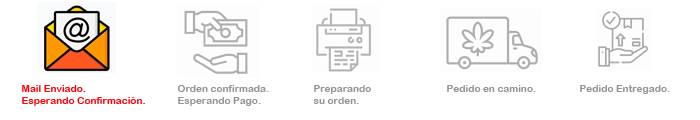
<style>
.page{position:relative;width:700px;height:120px;background:#ffffff}
.page>*{position:absolute;margin:0}
.t1{font:10px "ArialRoundedMTBold";color:#fe060c}
.t2{font:10px "ArialRoundedMTBold";color:#939394}
</style>
<div class="page">
<p class="t1" style="left:22px;top:85px;width:123px;height:21px">Mail Enviado.<br>Esperando Confirmación.</p>
<p class="t2" style="left:177px;top:85px;width:92px;height:21px">Orden confirmada.<br>Esperando Pago.</p>
<p class="t2" style="left:313px;top:85px;width:58px;height:19px">Preparando <br>su orden.</p>
<p class="t2" style="left:447px;top:85px;width:89px;height:7px">Pedido en camino.</p>
<p class="t2" style="left:580px;top:85px;width:90px;height:9px">Pedido Entregado.</p>
</div>
